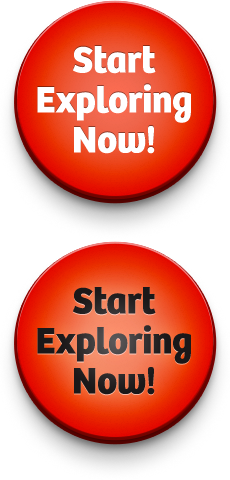
<style>
.page{position:relative;width:230px;height:480px;background:#ffffff}
.page>*{position:absolute;margin:0}
.t1{font:38px/40px "Bree-Bold";color:#ffffff}
.t2{font:38px/40px "Bree-Bold";color:#242021}
</style>
<div class="page">
<p class="t1" style="left:37px;top:46px;width:154px;height:108px;text-align:center">Start<br>Exploring<br>Now!</p>
<p class="t2" style="left:37px;top:287px;width:154px;height:108px;text-align:center">Start<br>Exploring<br>Now!</p>
</div>
